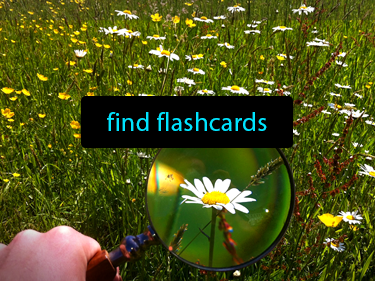
<style>
.page{position:relative;width:375px;height:281px}
.page>*{position:absolute;margin:0}
.t1{font:26.7px "MyriadPro-Regular";color:#00e5ff}
</style>
<div class="page">
<p class="t1" style="left:107px;top:112px;width:160px;height:19px">find flashcards</p>
</div>
